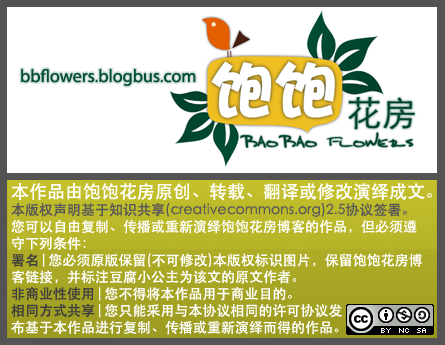
<style>
.page{position:relative;width:445px;height:345px;background:#ffffff}
.page>*{position:absolute;margin:0}
.t1{font:18px "MyriadPro-Regular";color:#004d31}
.t2{font:14px "STHeiti";color:#ffffff}
.t3{font:18px "STHeiti";color:#ffffff}
.t4{font:14px "STHeiti";color:#585858}
.t5{font:14px "STHeiti";color:#3f3f3f}
</style>
<div class="page">
<p class="t1" style="left:21px;top:69px;width:175px;height:17px">bbflowers.blogbus.com</p>
<p class="t2" style="left:11px;top:183px;width:421px;height:152px"><span class="t3">本作品由饱饱花房原创、转载、翻译或修改演绎成文。<br></span><span class="t4">本版权声明基于知识共享(creativecommons.org)2.5协议签署。<br></span>您可以自由复制、传播或重新演绎饱饱花房博客的作品，但必须遵<br>守下列条件：<br><span class="t5">署名</span>|您必须原版保留(不可修改)本版权标识图片，保留饱饱花房博<br>客链接，并标注豆腐小公主为该文的原文作者。<br><span class="t5">非商业性使用</span>|您不得将本作品用于商业目的。<br><span class="t5">相同方式共享</span>|您只能采用与本协议相同的许可协议发<br>布基于本作品进行复制、传播或重新演绎而得的作品。</p>
</div>
